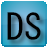
<style>
.page{position:relative;width:48px;height:48px}
.page>*{position:absolute;margin:0}
.t1{font:36px "MS-Gothic";color:#000000}
</style>
<div class="page">
<p class="t1" style="left:7px;top:12px;width:34px;height:28px">DS</p>
</div>
